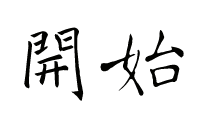
<style>
.page{position:relative;width:200px;height:119px;background:#ffffff}
.page>*{position:absolute;margin:0}
.t1{font:90px "HYc5gf";color:#020200}
</style>
<div class="page">
<p class="t1" style="left:24px;top:27px;width:160px;height:74px">开始</p>
</div>
